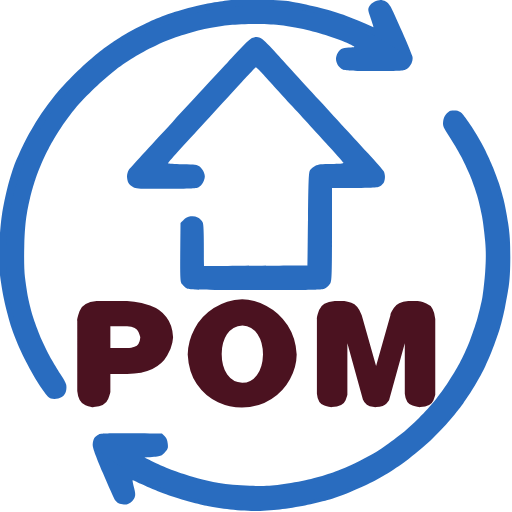
<style>
.page{position:relative;width:512px;height:512px;background:#ffffff}
.page>*{position:absolute;margin:0}
.t1{font:150px "Reeji-CloudHuPo-GB-Regular";color:#4b1220}
</style>
<div class="page">
<p class="t1" style="left:76px;top:299px;width:360px;height:109px">POM</p>
</div>
